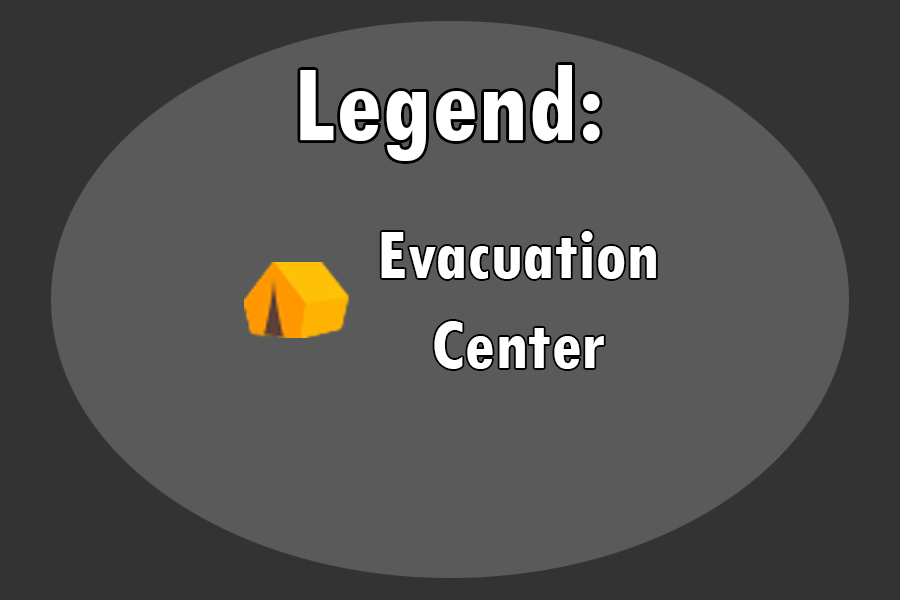
<style>
.page{position:relative;width:900px;height:600px;background:#5a5a5a}
.page>*{position:absolute;margin:0}
.t1{font:114.8px "TwCenMT-CondensedBold";color:#ffffff}
.t2{font:75px "TwCenMT-CondensedBold";color:#ffffff}
</style>
<div class="page">
<p class="t1" style="left:300px;top:65px;width:300px;height:96px">Legend:</p>
<p class="t2" style="left:381px;top:231px;width:275px;height:138px;text-align:center">Evacuation<br>Center</p>
</div>
